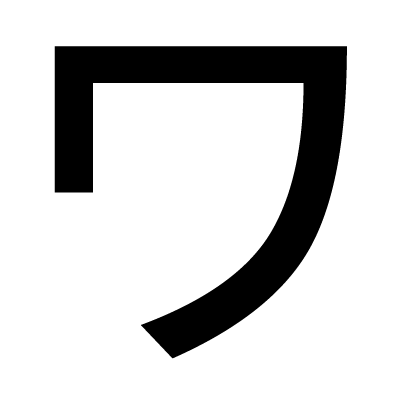
<style>
.page{position:relative;width:400px;height:400px;background:#ffffff}
.page>*{position:absolute;margin:0}
.t1{font:424.8px "MS-PGothic";color:#000000}
</style>
<div class="page">
<p class="t1" style="left:54px;top:46px;width:293px;height:313px">ワ</p>
</div>
